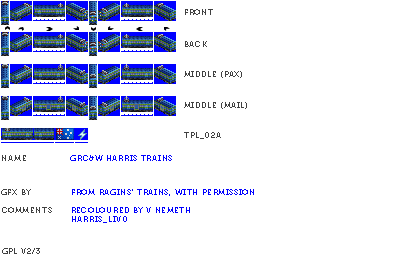
<style>
.page{position:relative;width:400px;height:270px;background:#ffffff}
.page>*{position:absolute;margin:0}
.t1{font:8px "Museo700-Regular";letter-spacing:0.075em;color:#404040;text-transform:uppercase}
.t2{font:8px "Museo700-Regular";letter-spacing:0.075em;color:#0000ff;text-transform:uppercase}
</style>
<div class="page">
<p class="t1" style="left:185px;top:9px;width:28px;height:6px">front</p>
<p class="t1" style="left:185px;top:41px;width:22px;height:6px">back</p>
<p class="t1" style="left:184px;top:71px;width:58px;height:7px">middle (pax)</p>
<p class="t1" style="left:184px;top:102px;width:63px;height:7px">middle (mail)</p>
<p class="t1" style="left:184px;top:132px;width:37px;height:7px">tpl_02a</p>
<p class="t1" style="left:2px;top:155px;width:24px;height:6px">name</p>
<p class="t2" style="left:70px;top:155px;width:102px;height:6px">GRC&amp;W Harris Trains</p>
<p class="t1" style="left:1px;top:189px;width:30px;height:6px">gfx by</p>
<p class="t2" style="left:72px;top:189px;width:182px;height:7px">from ragins' trains, with permission</p>
<p class="t1" style="left:2px;top:207px;width:50px;height:6px">comments</p>
<p class="t2" style="left:72px;top:207px;width:118px;height:16px">recoloured by v nemeth<br>Harris_Liv0</p>
<p class="t1" style="left:2px;top:248px;width:38px;height:6px">gpl v2/3</p>
</div>
